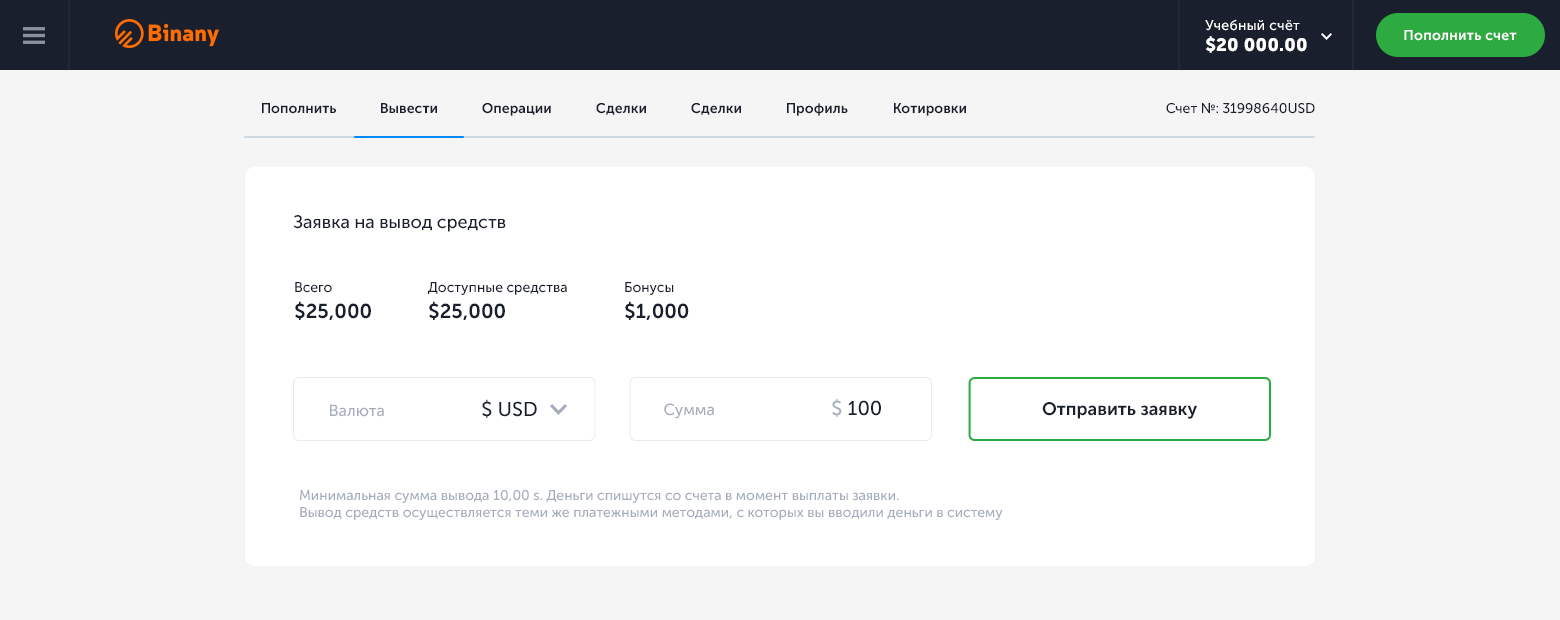
<style>
.page{position:relative;width:1560px;height:620px;background:#f5f5f5}
.page>*{position:absolute;margin:0}
.t1{font:14px "MuseoSansCyrl-500";letter-spacing:0.02em;color:#ffffff}
.t2{font:18px "MuseoSansCyrl-900";letter-spacing:0.02em;color:#ffffff}
.t3{font:14px "MuseoSansCyrl-700";letter-spacing:0.02em;color:#ffffff}
.t4{font:14px "MuseoSansCyrl-700";color:#191f2d}
.t5{font:14px "MuseoSansCyrl-500";color:#191f2d}
.t6{font:18px "MuseoSansCyrl-500";color:#191f2d}
.t7{font:20px/26px "MuseoSansCyrl-700";color:#191f2d}
.t8{font:14px/26px "MuseoSansCyrl-500";color:#191f2d}
.t9{font:16px "MuseoSansCyrl-500";color:#a5acbd}
.t10{font:20px "MuseoSansCyrl-500";color:#191f2d}
.t11{font:20px "MuseoSansCyrl-500";color:#a5acbd}
.t12{font:18px "MuseoSansCyrl-700";color:#191f2d}
.t13{font:14px "MuseoSansCyrl-500";color:#a5acbd}
</style>
<div class="page">
<p class="t1" style="left:1205px;top:19px;width:102px;height:34px">Учебный счёт<br><span class="t2">$20 000.00</span></p>
<p class="t3" style="left:1404px;top:30px;width:113px;height:11px">Пополнить счет</p>
<p class="t4" style="left:262px;top:103px;width:74px;height:11px">Пополнить</p>
<p class="t4" style="left:381px;top:103px;width:56px;height:11px">Вывести</p>
<p class="t4" style="left:482px;top:103px;width:69px;height:13px">Операции</p>
<p class="t4" style="left:596px;top:103px;width:50px;height:12px">Сделки</p>
<p class="t4" style="left:691px;top:103px;width:50px;height:12px">Сделки</p>
<p class="t4" style="left:787px;top:103px;width:61px;height:13px">Профиль</p>
<p class="t4" style="left:894px;top:103px;width:72px;height:13px">Котировки</p>
<p class="t5" style="left:1166px;top:103px;width:149px;height:11px">Счет №: 31998640USD</p>
<p class="t6" style="left:293px;top:215px;width:213px;height:17px">Заявка на вывод средств</p>
<p class="t7" style="left:295px;top:282px;width:76px;height:38px"><span class="t8">Всего<br></span>$25,000</p>
<p class="t8" style="left:428px;top:282px;width:139px;height:38px">Доступные средства<br><span class="t7">$25,000</span></p>
<p class="t8" style="left:625px;top:282px;width:64px;height:38px">Бонусы<br><span class="t7">$1,000</span></p>
<p class="t9" style="left:330px;top:399px;width:207px;height:19px">Валюта                        <span class="t10">$ USD</span></p>
<p class="t9" style="left:664px;top:398px;width:217px;height:21px">Сумма                             <span class="t11">$</span><span class="t10"> 100</span></p>
<p class="t12" style="left:1042px;top:402px;width:155px;height:17px">Отправить заявку</p>
<p class="t13" style="left:300px;top:490px;width:703px;height:30px">Минимальная сумма вывода 10,00 s. Деньги спишутся со счета в момент выплаты заявки. <br>Вывод средств осуществляется теми же платежными методами, с которых вы вводили деньги в систему</p>
</div>
